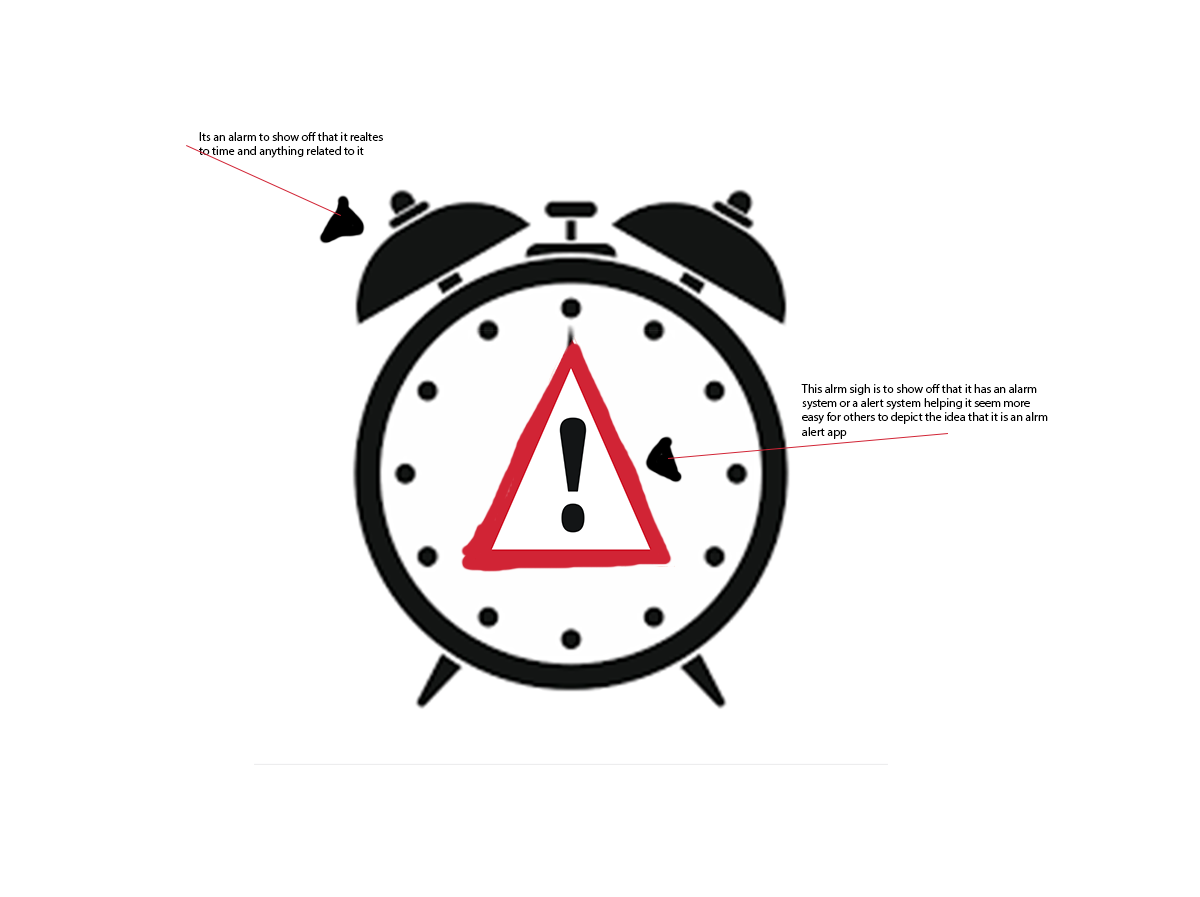
<style>
.page{position:relative;width:1200px;height:897px;background:#ffffff}
.page>*{position:absolute;margin:0}
.t1{font:12px "MyriadPro-Regular";color:#000000}
</style>
<div class="page">
<p class="t1" style="left:199px;top:132px;width:184px;height:26px">Its an alarm to show off that it realtes to time and anything related to it</p>
<p class="t1" style="left:801px;top:384px;width:247px;height:55px">This alrm sigh is to show off that it has an alarm system or a alert system helping it seem more easy for others to depict the idea that it is an alrm alert app</p>
</div>
